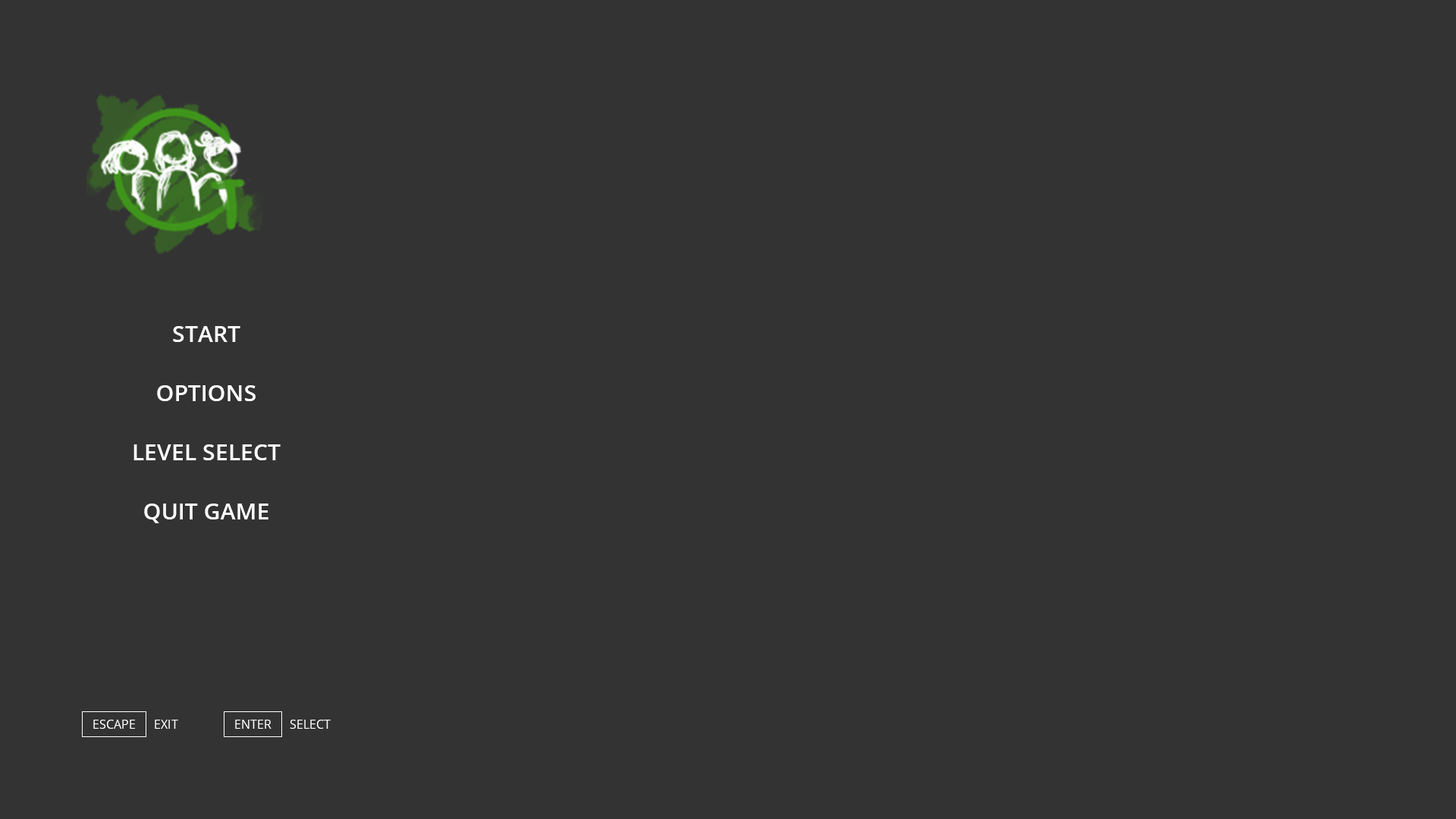
<style>
.page{position:relative;width:1456px;height:819px;background:#333333}
.page>*{position:absolute;margin:0}
.t1{font:22.7px/59.1px "OpenSans-SemiBold";color:#ffffff;text-transform:uppercase}
.t2{font:12.1px "OpenSans-Regular";color:#ffffff;text-transform:uppercase}
</style>
<div class="page">
<p class="t1" style="left:133px;top:326px;width:148px;height:197px;text-align:center">Start<br>Options<br>Level Select<br>Quit game</p>
<p class="t2" style="left:93px;top:720px;width:42px;height:9px">Escape</p>
<p class="t2" style="left:155px;top:720px;width:23px;height:9px">exit</p>
<p class="t2" style="left:235px;top:720px;width:36px;height:9px">Enter</p>
<p class="t2" style="left:290px;top:720px;width:41px;height:9px">select</p>
</div>
